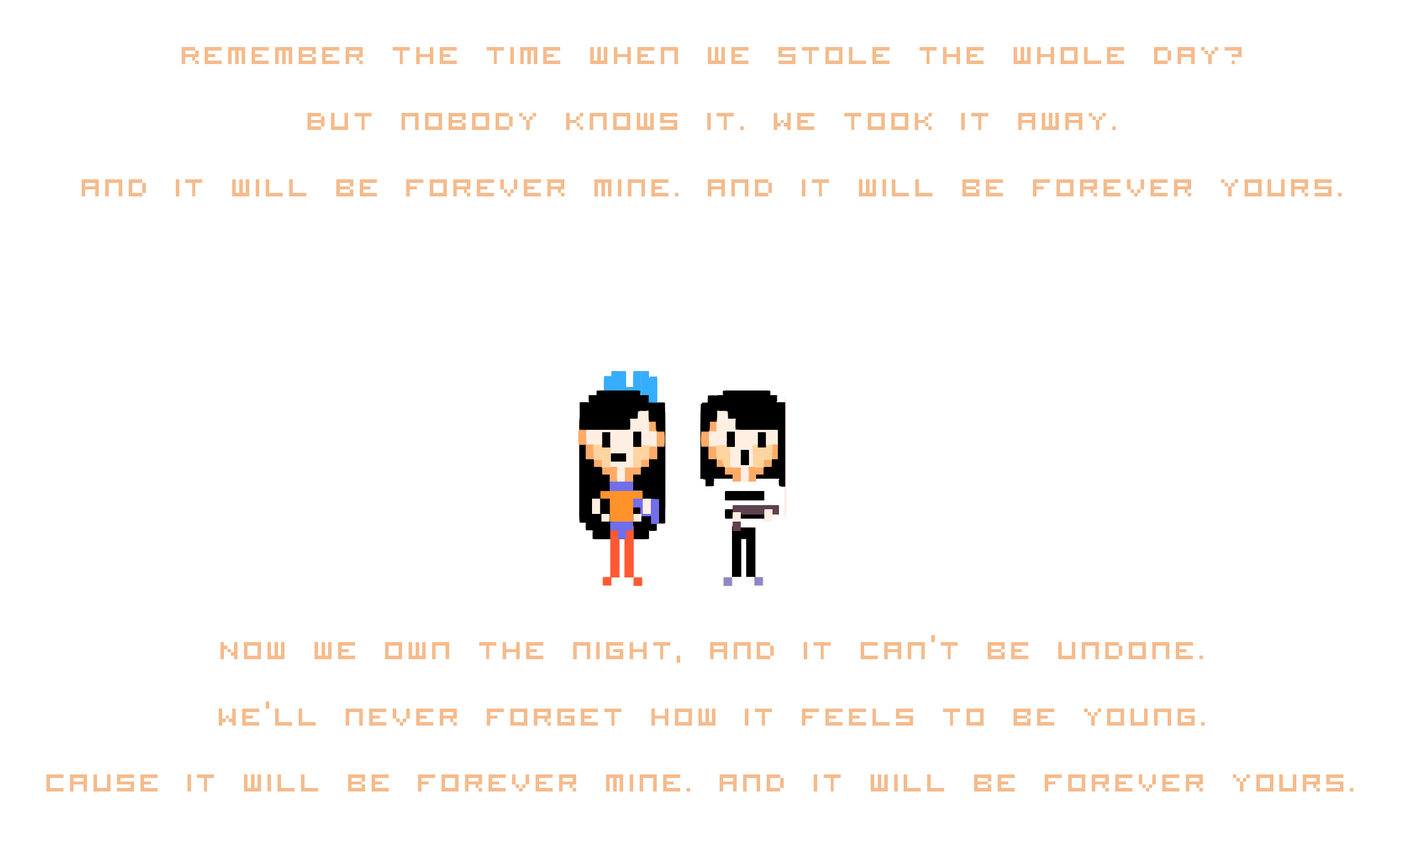
<style>
.page{position:relative;width:1411px;height:845px;background:#ffffff}
.page>*{position:absolute;margin:0}
.t1{font:34.3px/66.2px "VisitorTT1BRK";letter-spacing:0.085em;color:#f5bb8c}
</style>
<div class="page">
<p class="t1" style="left:46px;top:47px;width:1308px;height:744px;text-align:center">Remember the time when we stole the whole day?<br>But nobody knows it. We took it away.<br>And it will be forever mine. And it will be forever yours.<br><br><br><br><br><br><br>Now we own the night, and it can’t be undone.<br>We’ll never forget how it feels to be young.<br>Cause it will be forever mine. And it will be forever yours.</p>
</div>
